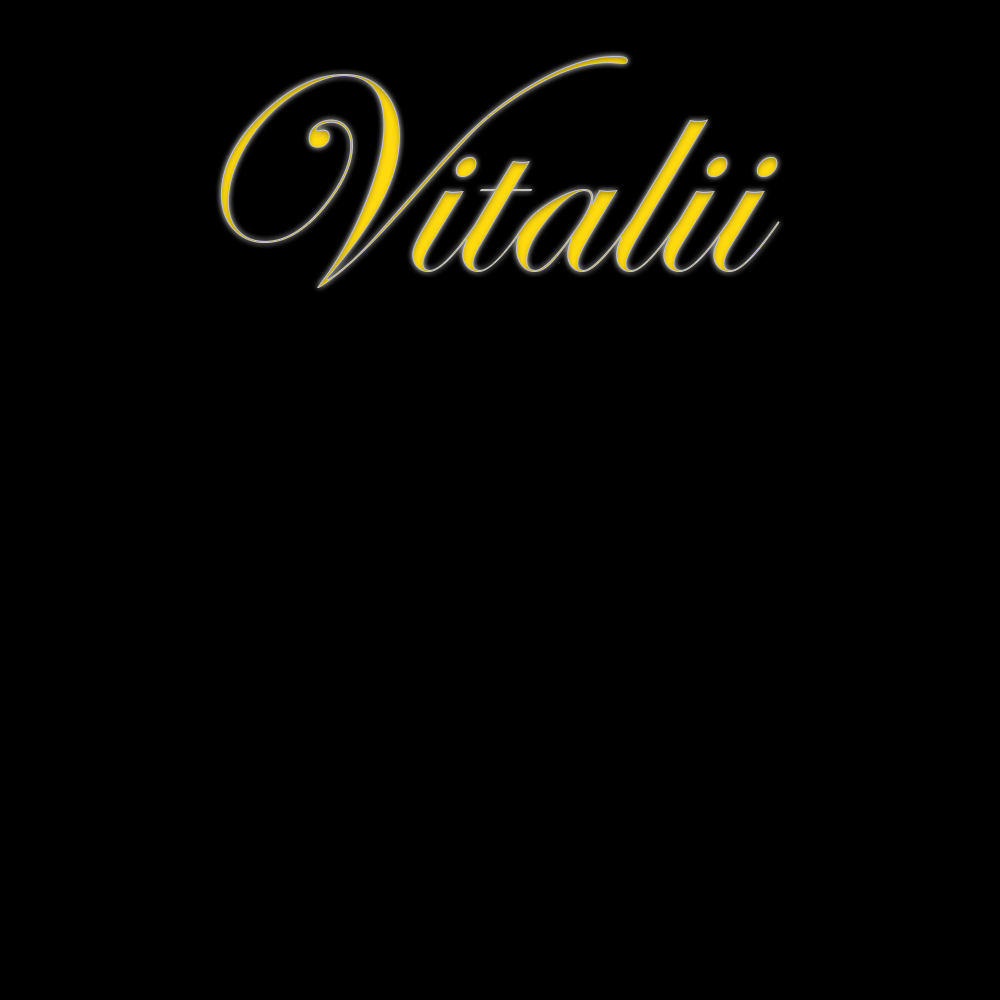
<style>
.page{position:relative;width:1000px;height:1000px;background:#000000}
.page>*{position:absolute;margin:0}
.t1{font:164.5px "EdwardianScriptITC"}
</style>
<div class="page">
<p class="t1" style="left:220px;top:56px;width:560px;height:232px">Vitalii</p>
</div>
